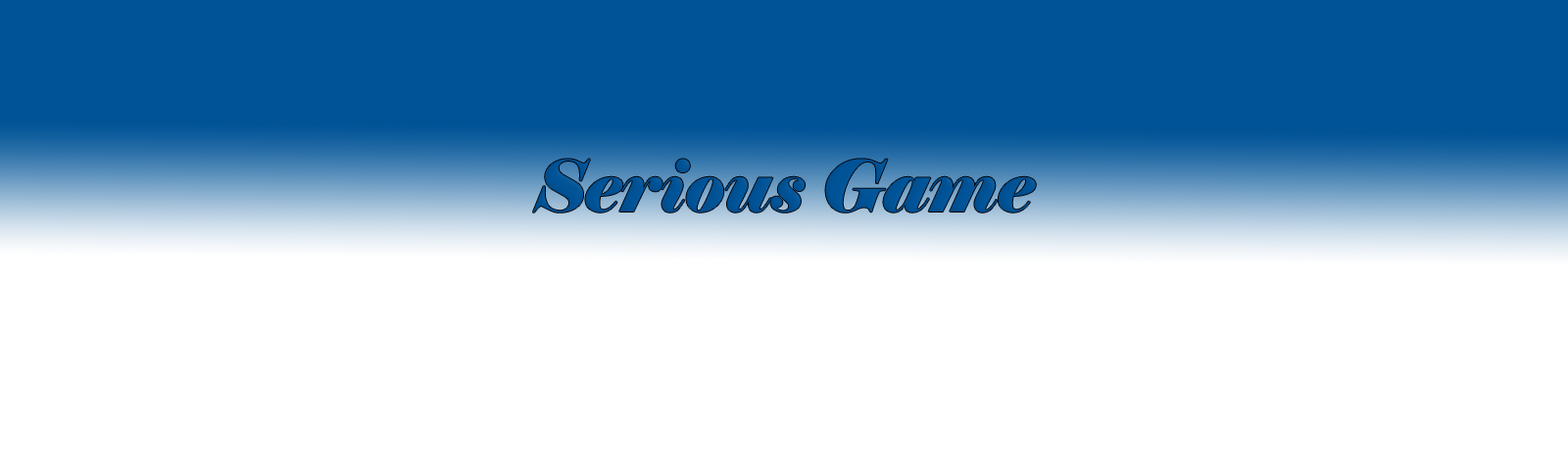
<style>
.page{position:relative;width:1568px;height:474px;background:#ffffff}
.page>*{position:absolute;margin:0}
.t1{font:70.6px "Elephant-Italic";color:#005397}
</style>
<div class="page">
<p class="t1" style="left:533px;top:159px;width:503px;height:54px">Serious Game</p>
</div>
